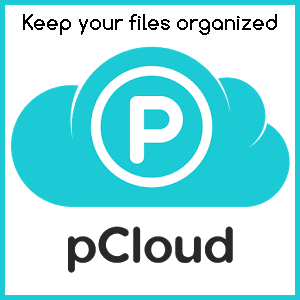
<style>
.page{position:relative;width:300px;height:300px;background:#ffffff}
.page>*{position:absolute;margin:0}
.t1{font:20px "Comfortaa-Bold";color:#010000}
</style>
<div class="page">
<p class="t1" style="left:23px;top:14px;width:254px;height:21px">Keep your files organized</p>
</div>
